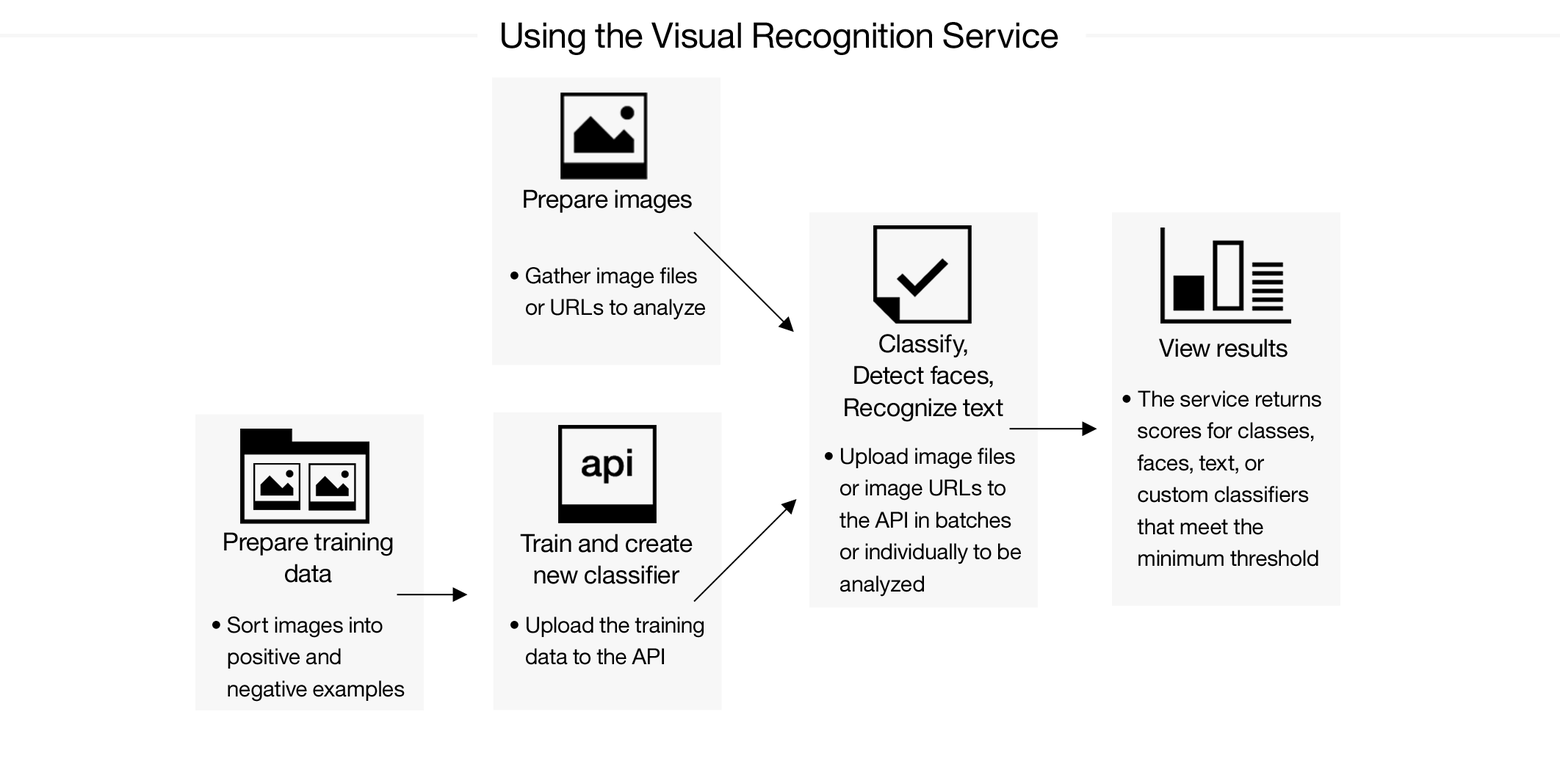
<style>
.page{position:relative;width:1560px;height:764px;background:#ffffff}
.page>*{position:absolute;margin:0}
.t1{font:35.2px "HelvNeueforIBM";color:#000000}
.t2{font:25px "HelvNeueforIBM";color:#000000}
.t3{font:22px/32px "HelvNeueforIBM";color:#000000}
.t4{font:25px/32px "HelvNeueforIBM";color:#000000}
</style>
<div class="page">
<p class="t1" style="left:502px;top:22px;width:556px;height:33px">Using the Visual Recognition Service</p>
<p class="t2" style="left:524px;top:189px;width:168px;height:25px">Prepare images</p>
<p class="t3" style="left:510px;top:267px;width:195px;height:53px">• Gather image files or URLs to analyze</p>
<p class="t4" style="left:845px;top:334px;width:158px;height:88px;text-align:center">Classify,<br>Detect faces,<br>Recognize text</p>
<p class="t2" style="left:1159px;top:339px;width:128px;height:19px">View results</p>
<p class="t3" style="left:1122px;top:391px;width:199px;height:176px">• The service returns scores for classes, faces, text, or custom classifiers that meet the minimum threshold</p>
<p class="t3" style="left:825px;top:448px;width:196px;height:149px">• Upload image files or image URLs to the API in batches or individually to be analyzed</p>
<p class="t4" style="left:224px;top:532px;width:169px;height:51px;text-align:center">Prepare training data</p>
<p class="t4" style="left:520px;top:534px;width:173px;height:51px;text-align:center">Train and create new classifier</p>
<p class="t3" style="left:212px;top:617px;width:193px;height:85px">• Sort images into positive and negative examples</p>
<p class="t3" style="left:510px;top:617px;width:194px;height:48px">• Upload the training data to the API</p>
</div>
